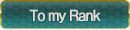
<style>
.page{position:relative;width:130px;height:30px}
.page>*{position:absolute;margin:0}
.t1{font:14px "GothicMB101Pro-Regular";letter-spacing:-0.08em;color:#e6dad2;font-weight:bold;scale:0.9 1}
</style>
<div class="page">
<p class="t1" style="left:29px;top:9px;width:72px;height:14px">To my Rank</p>
</div>
